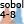
<style>
.page{position:relative;width:24px;height:24px}
.page>*{position:absolute;margin:0}
.t1{font:8.8px "MSReferenceSansSerif";color:#000000;scale:1.04 1}
</style>
<div class="page">
<p class="t1" style="left:0px;top:0px;width:24px;height:18px">sobol<br>4-8</p>
</div>
